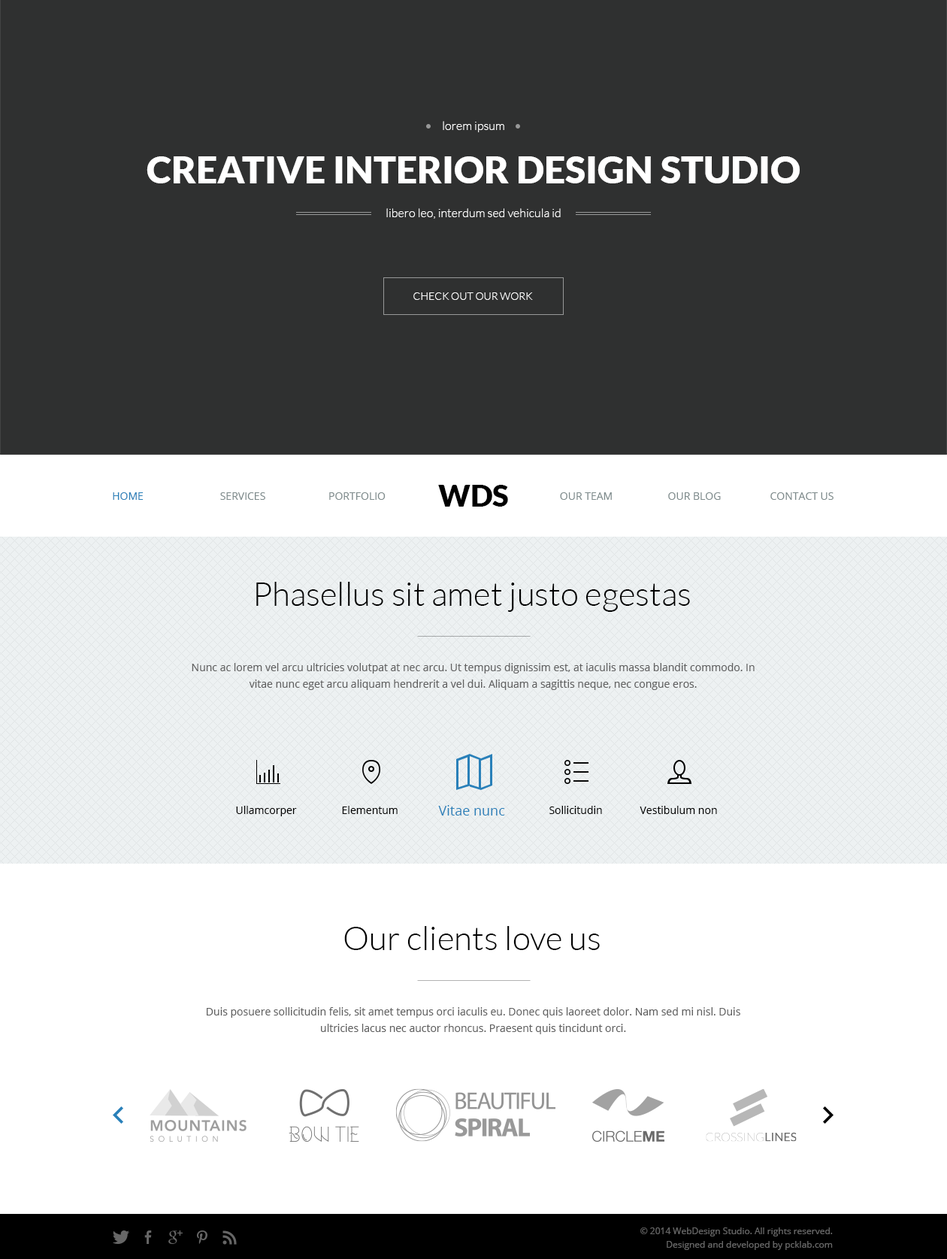
<style>
.page{position:relative;width:947px;height:1259px;background:#2f3030}
.page>*{position:absolute;margin:0}
.t1{font:12px "Lato-Light";color:#ffffff}
.t2{font:37.6px "Lato-Black";color:#ffffff;text-transform:uppercase}
.t3{font:10.5px "Lato-Light";color:#ffffff;text-transform:uppercase}
.t4{font:30.1px "Lato-Black";color:#000000;text-transform:uppercase}
.t5{font:10.5px "OpenSans";color:#2980b9;text-transform:uppercase}
.t6{font:10.5px "OpenSans";color:#7f8c8d;text-transform:uppercase}
.t7{font:33.1px "Lato-Light";color:#000000}
.t8{font:10.5px/16.5px "OpenSans";color:#616060}
.t9{font:10.5px "OpenSans";color:#000000}
.t10{font:13.5px "OpenSans";color:#2980b9}
.t11{font:10.5px/16.5px "OpenSans";color:#606060}
.t12{font:9px/13.5px "OpenSans";color:#666666}
</style>
<div class="page">
<p class="t1" style="left:443px;top:121px;width:61px;height:11px">lorem ipsum</p>
<p class="t2" style="left:147px;top:156px;width:653px;height:27px">creative interior design studio</p>
<p class="t1" style="left:386px;top:208px;width:175px;height:11px">libero leo, interdum sed vehicula id</p>
<p class="t3" style="left:413px;top:292px;width:120px;height:8px">check out our work</p>
<p class="t4" style="left:438px;top:485px;width:70px;height:22px">WDs</p>
<p class="t5" style="left:113px;top:492px;width:31px;height:8px">home</p>
<p class="t6" style="left:220px;top:492px;width:45px;height:8px">services</p>
<p class="t6" style="left:329px;top:492px;width:57px;height:8px">Portfolio</p>
<p class="t6" style="left:560px;top:492px;width:52px;height:8px">our team</p>
<p class="t6" style="left:668px;top:492px;width:53px;height:8px">our blog</p>
<p class="t6" style="left:770px;top:492px;width:64px;height:8px">Contact us</p>
<p class="t7" style="left:256px;top:582px;width:434px;height:30px">Phasellus sit amet justo egestas</p>
<p class="t8" style="left:192px;top:663px;width:563px;height:27px;text-align:center">Nunc ac lorem vel arcu ultricies volutpat at nec arcu. Ut tempus dignissim est, at iaculis massa blandit commodo. In vitae nunc eget arcu aliquam hendrerit a vel dui. Aliquam a sagittis neque, nec congue eros.</p>
<p class="t9" style="left:236px;top:806px;width:61px;height:10px">Ullamcorper</p>
<p class="t9" style="left:342px;top:806px;width:56px;height:8px">Elementum</p>
<p class="t10" style="left:438px;top:805px;width:67px;height:11px">Vitae nunc</p>
<p class="t9" style="left:549px;top:806px;width:53px;height:8px">Sollicitudin</p>
<p class="t9" style="left:640px;top:806px;width:77px;height:8px">Vestibulum non</p>
<p class="t7" style="left:344px;top:926px;width:256px;height:24px">Our clients love us</p>
<p class="t11" style="left:207px;top:1007px;width:533px;height:27px;text-align:center">Duis posuere sollicitudin felis, sit amet tempus orci iaculis eu. Donec quis laoreet dolor. Nam sed mi nisl. Duis ultricies lacus nec auctor rhoncus. Praesent quis tincidunt orci.</p>
<p class="t12" style="left:640px;top:1227px;width:193px;height:23px;text-align:right">© 2014 WebDesign Studio. All rights reserved.<br>Designed and developed by pcklab.com</p>
</div>
